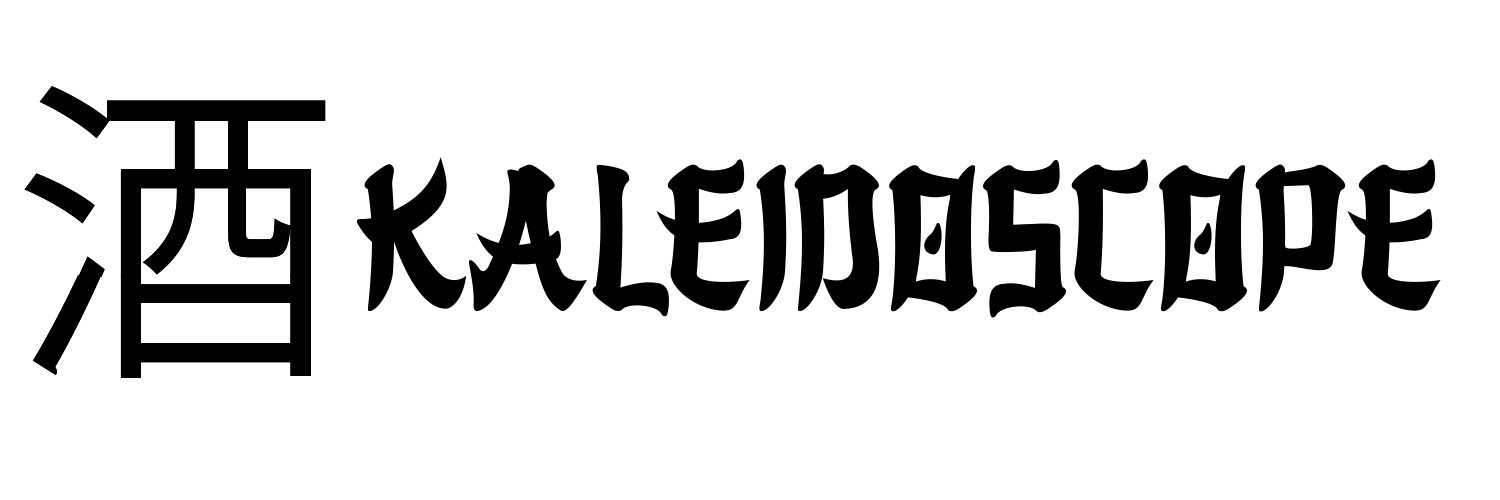
<style>
.page{position:relative;width:1500px;height:500px;background:#ffffff}
.page>*{position:absolute;margin:0}
.t1{font:195.1px "KARASHA";color:#000000;scale:0.93 1}
</style>
<div class="page">
<p class="t1" style="left:356px;top:157px;width:1085px;height:161px">KALEIDOSCOPE</p>
</div>
